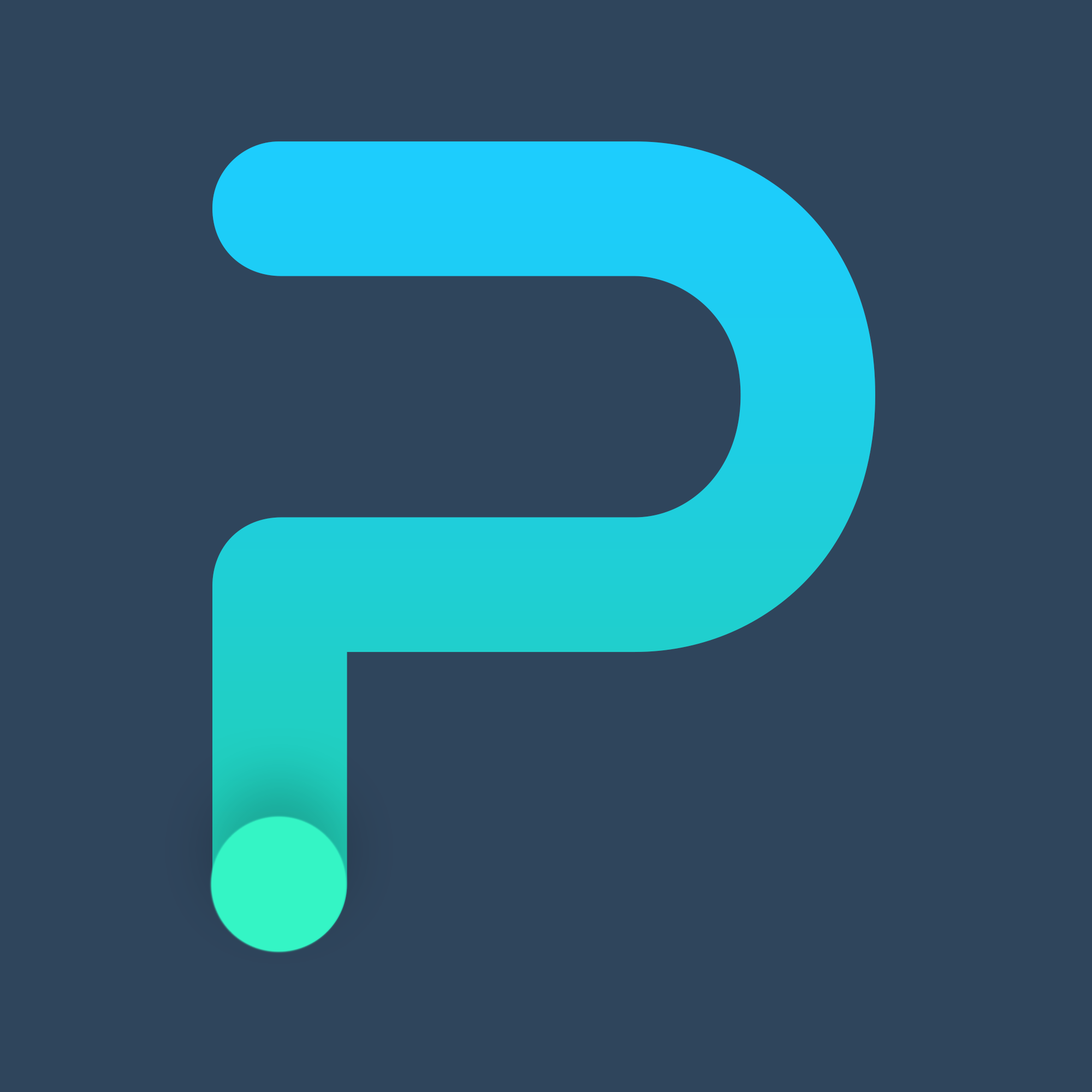
<style>
.page{position:relative;width:1092px;height:1092px;background:#2f455c}
.page>*{position:absolute;margin:0}
.t1{font:1112.5px "Patron-PersonalUse-Regular"}
</style>
<div class="page">
<p class="t1" style="left:212px;top:141px;width:663px;height:810px">P</p>
</div>
